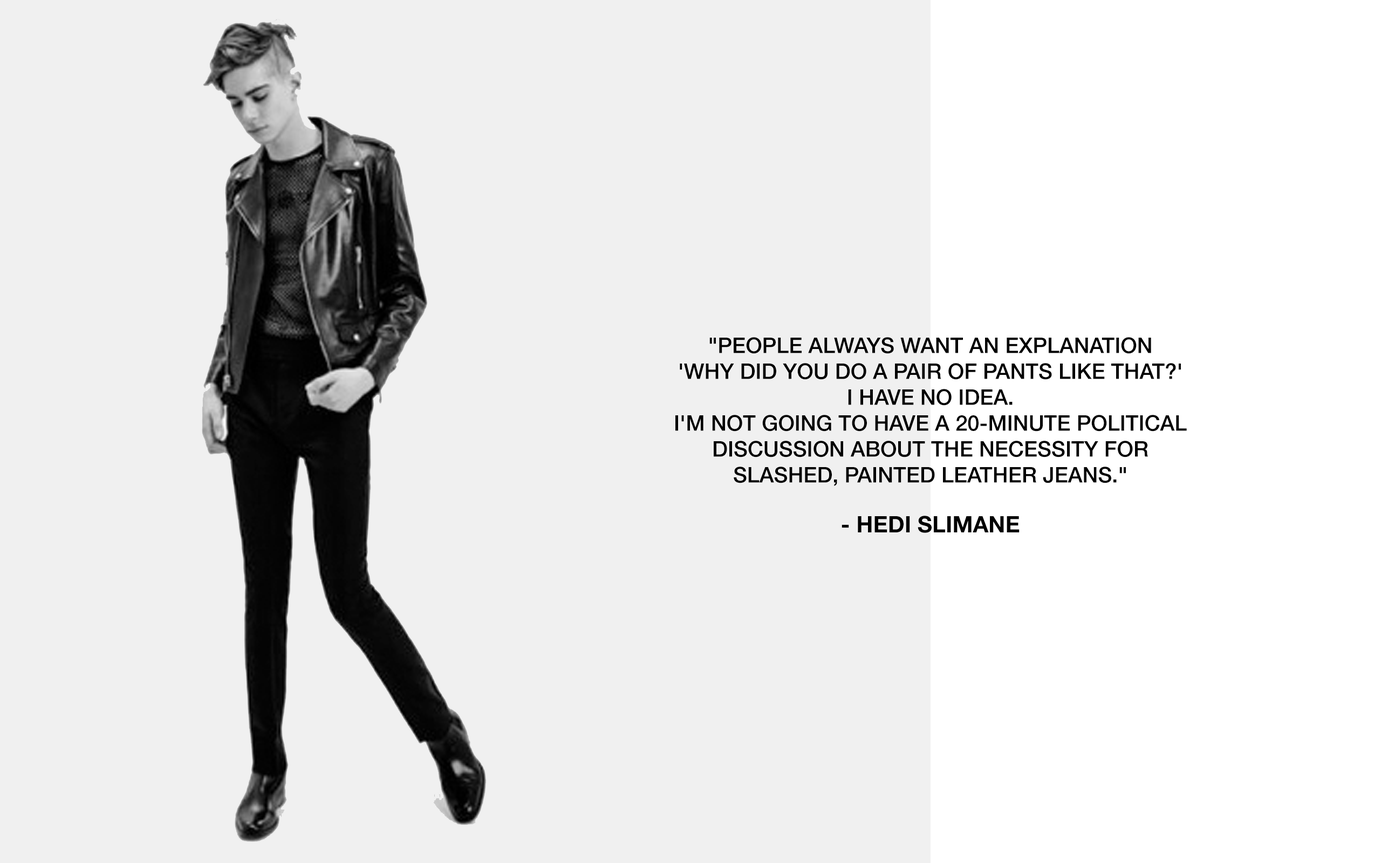
<style>
.page{position:relative;width:1381px;height:863px;background:#f0f0f0}
.page>*{position:absolute;margin:0}
.t1{font:21.6px "HelveticaNeue-Medium";color:#000000}
.t2{font:22.7px "HelveticaNeue-Bold";color:#000000}
</style>
<div class="page">
<p class="t1" style="left:676px;top:337px;width:511px;height:196px;text-align:center">"PEOPLE ALWAYS WANT AN EXPLANATION <br>'WHY DID YOU DO A PAIR OF PANTS LIKE THAT?' <br>I HAVE NO IDEA. <br>I'M NOT GOING TO HAVE A 20-MINUTE POLITICAL DISCUSSION ABOUT THE NECESSITY FOR SLASHED, PAINTED LEATHER JEANS."<br><br><span class="t2">- HEDI SLIMANE</span></p>
</div>
